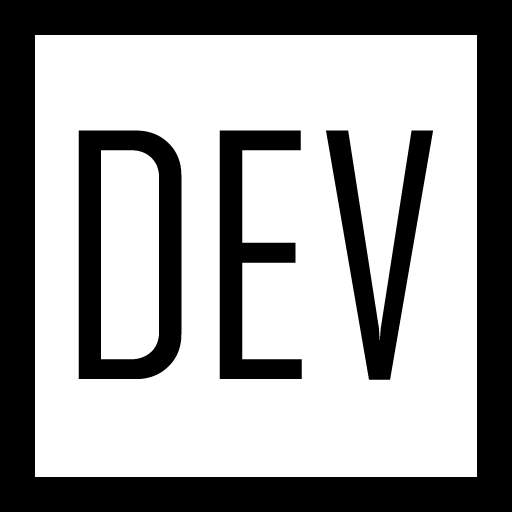
<style>
.page{position:relative;width:512px;height:512px;background:#ffffff}
.page>*{position:absolute;margin:0}
.t1{font:325px "AgencyFB-Reg";color:#000000}
</style>
<div class="page">
<p class="t1" style="left:78px;top:130px;width:355px;height:250px">DEV</p>
</div>
